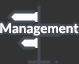
<style>
.page{position:relative;width:79px;height:64px;background:#333333}
.page>*{position:absolute;margin:0}
.t1{font:13.3px "Lato-Bold";color:#ffffff}
</style>
<div class="page">
<p class="t1" style="left:0px;top:23px;width:79px;height:13px">Management</p>
</div>
